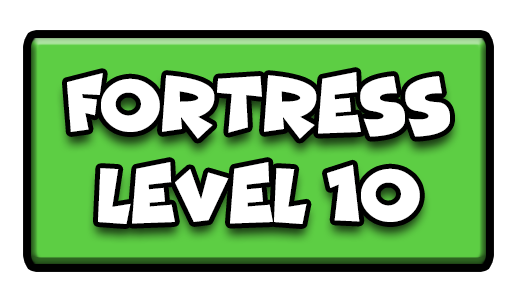
<style>
.page{position:relative;width:517px;height:301px;background:#ffffff}
.page>*{position:absolute;margin:0}
.t1{font:77.7px "Funhouse";color:#ffffff;scale:0.95 1}
</style>
<div class="page">
<p class="t1" style="left:67px;top:72px;width:383px;height:67px">FORTRESS</p>
<p class="t1" style="left:98px;top:162px;width:322px;height:62px">LEVEL 10</p>
</div>
